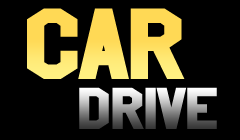
<style>
.page{position:relative;width:240px;height:140px;background:#000000}
.page>*{position:absolute;margin:0}
.t1{font:100px "HollywoodHills"}
.t2{font:58.3px "HollywoodHills"}
</style>
<div class="page">
<p class="t1" style="left:27px;top:8px;width:158px;height:71px">Car</p>
<p class="t2" style="left:79px;top:87px;width:138px;height:42px">Drive</p>
</div>
